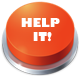
<style>
.page{position:relative;width:80px;height:76px;background:#ffffff}
.page>*{position:absolute;margin:0}
.t1{font:12px/14.3px "GillSans-UltraBold";color:#ffffff}
</style>
<div class="page">
<p class="t1" style="left:21px;top:18px;width:39px;height:24px;text-align:center">HELP<br> IT!</p>
</div>
